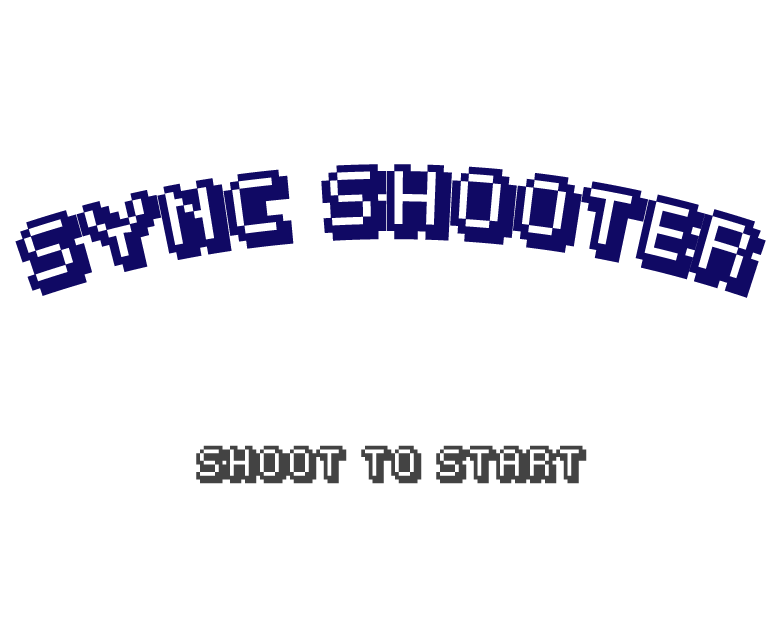
<style>
.page{position:relative;width:773px;height:634px;background:#ffffff}
.page>*{position:absolute;margin:0}
.t1{font:60px "Fipps-Regular";color:#100964}
.t2{font:30px "Fipps-Regular";color:#434343}
</style>
<div class="page">
<p class="t1" style="left:15px;top:164px;width:751px;height:134px">SYNC SHOOTER</p>
<p class="t2" style="left:196px;top:445px;width:391px;height:39px">SHOOT TO START</p>
</div>
